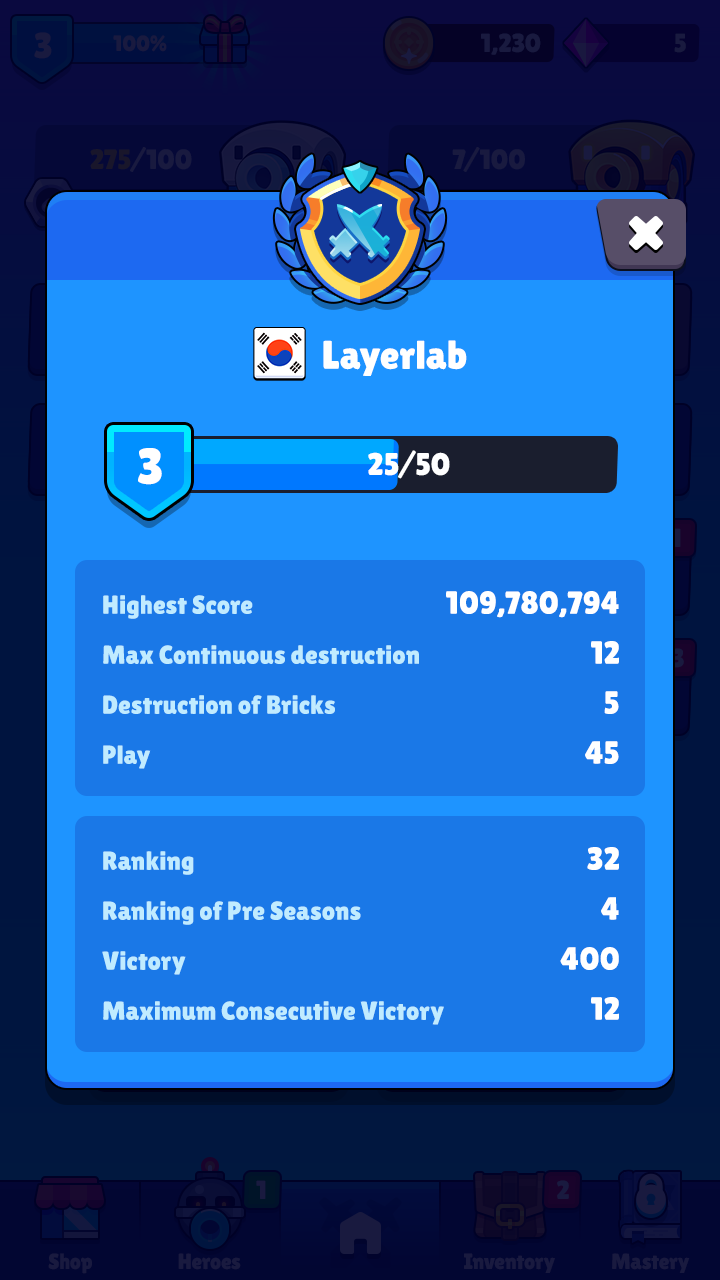
<style>
.page{position:relative;width:720px;height:1280px;background:#1a78e7}
.page>*{position:absolute;margin:0}
.t1{font:40px "LilitaOne";color:#ffffff}
.t2{font:50.6px "LilitaOne";color:#ffffff}
.t3{font:31.2px "LilitaOne";color:#ffffff;text-transform:uppercase}
.t4{font:32px/50px "LilitaOne";color:#ffffff}
.t5{font:26px/50px "LilitaOne";color:#c0ebff}
</style>
<div class="page">
<p class="t1" style="left:323px;top:340px;width:144px;height:36px">Layerlab</p>
<p class="t2" style="left:138px;top:448px;width:24px;height:37px">3</p>
<p class="t3" style="left:368px;top:450px;width:82px;height:29px">25/50</p>
<p class="t4" style="left:446px;top:591px;width:173px;height:173px;text-align:right">109,780,794<br>12<br>5<br>45</p>
<p class="t5" style="left:103px;top:595px;width:316px;height:174px">Highest Score<br>Max Continuous destruction<br>Destruction of Bricks<br>Play</p>
<p class="t5" style="left:102px;top:851px;width:342px;height:174px">Ranking<br>Ranking of Pre Seasons<br>Victory<br>Maximum Consecutive Victory</p>
<p class="t4" style="left:560px;top:847px;width:59px;height:173px;text-align:right">32<br>4<br>400<br>12</p>
</div>
